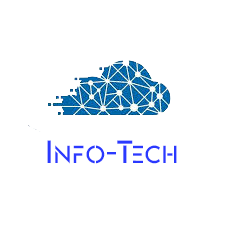
<style>
.page{position:relative;width:225px;height:225px;background:#ffffff}
.page>*{position:absolute;margin:0}
.t1{font:36px "DESIGNERRegular";color:#2a39ff}
.t2{font:36px "MyriadPro-Regular";color:#2a39ff}
</style>
<div class="page">
<p class="t1" style="left:47px;top:140px;width:130px;height:24px">Info<span class="t2">-</span>Tech</p>
</div>
